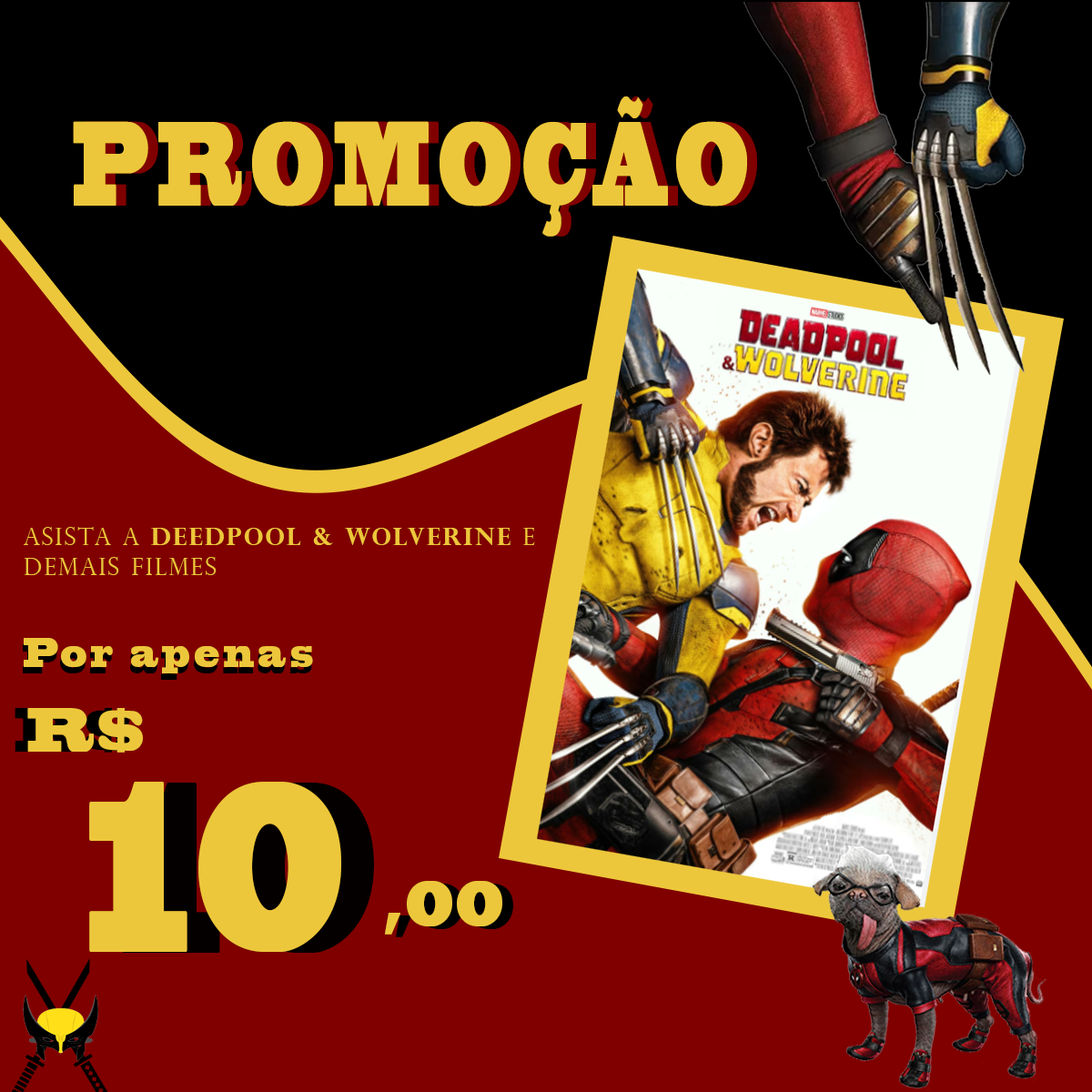
<style>
.page{position:relative;width:1092px;height:1092px;background:#800000}
.page>*{position:absolute;margin:0}
.t1{font:111.8px "BlackoakStd";letter-spacing:0.2em;color:#edc73b;scale:0.38 1}
.t2{font:24.6px "PerpetuaTitlingMT-Bold";letter-spacing:0.1em;color:#edc73b;scale:0.95 1}
.t3{font:24.6px "PerpetuaTitlingMT-Light";letter-spacing:0.1em;color:#edc73b;scale:0.95 1}
.t4{font:38.6px "BlackoakStd";letter-spacing:0.2em;color:#edc73b;scale:0.5 1}
.t5{font:57.8px "BlackoakStd";letter-spacing:0.1em;color:#edc73b;scale:0.58 1}
.t6{font:227.3px "BlackoakStd";letter-spacing:0.05em;color:#edc73b;scale:0.44 1}
.t7{font:60.2px "BlackoakStd";letter-spacing:0.05em;color:#edc73b;scale:0.54 1}
</style>
<div class="page">
<p class="t1" style="left:73px;top:96px;width:674px;height:141px">PROMOÇÃO</p>
<p class="t1" style="left:83px;top:96px;width:674px;height:141px">PROMOÇÃO</p>
<p class="t2" style="left:24px;top:527px;width:511px;height:48px"><span class="t3">Asista a </span>Deedpool &amp; Wolverine <span class="t3">e <br>demais filmes</span></p>
<p class="t4" style="left:24px;top:638px;width:289px;height:35px">Por apenas</p>
<p class="t5" style="left:27px;top:708px;width:116px;height:45px">R$</p>
<p class="t6" style="left:89px;top:782px;width:252px;height:170px">10</p>
<p class="t7" style="left:385px;top:881px;width:117px;height:54px">,00</p>
</div>
